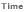
<style>
.page{position:relative;width:24px;height:12px;background:#ffffff}
.page>*{position:absolute;margin:0}
.t1{font:9px "AmiraParadiso";letter-spacing:0.05em;color:#646464}
</style>
<div class="page">
<p class="t1" style="left:1px;top:3px;width:22px;height:6px">Time</p>
</div>
